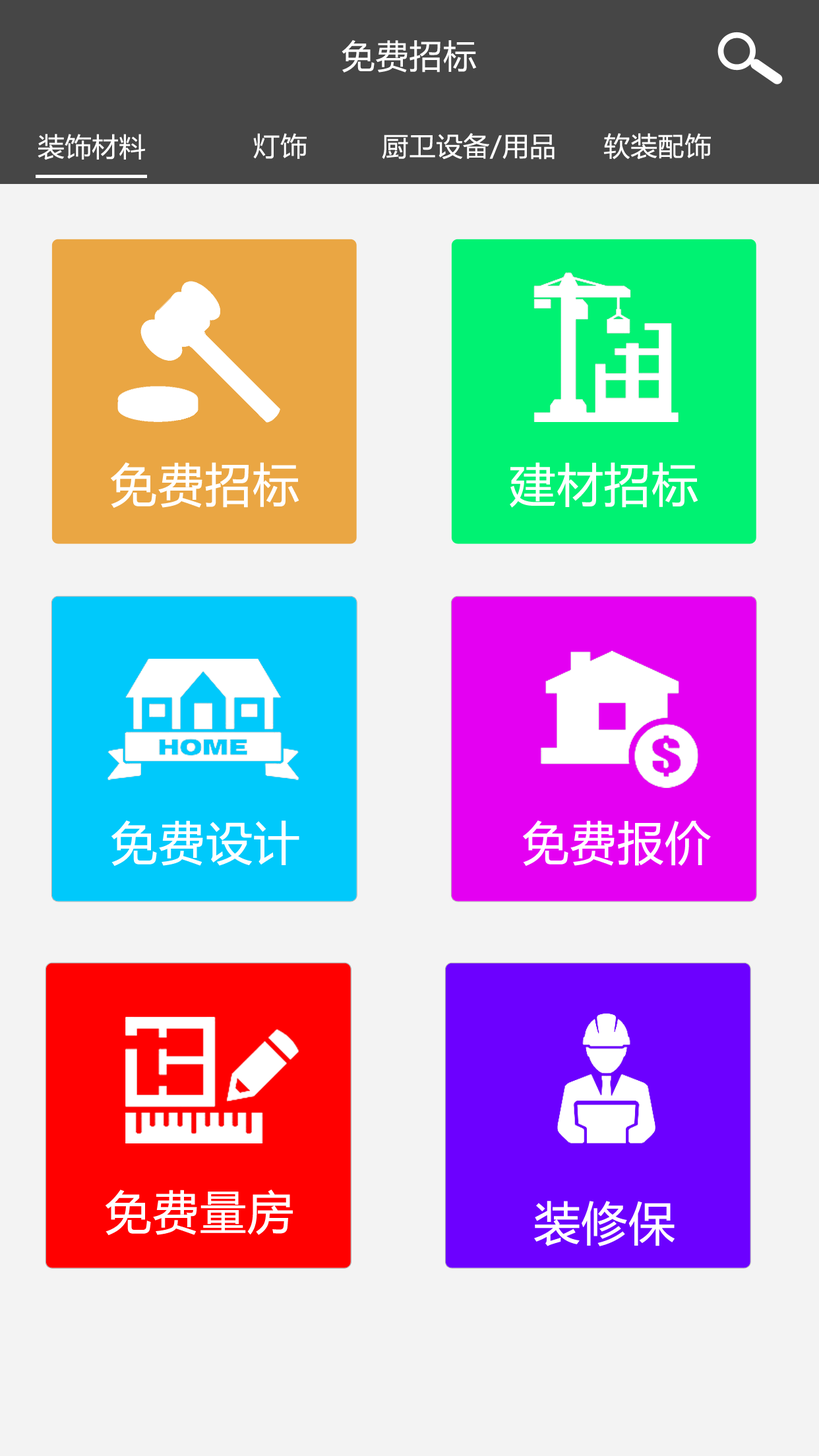
<style>
.page{position:relative;width:819px;height:1456px;background:#f3f3f3}
.page>*{position:absolute;margin:0}
.t1{font:33px "MicrosoftYaHei";color:#ffffff;font-weight:bold}
.t2{font:26.4px "MicrosoftYaHei";color:#ffffff;font-weight:bold}
.t3{font:46.2px "MicrosoftYaHei";color:#ffffff;font-weight:bold}
</style>
<div class="page">
<p class="t1" style="left:342px;top:40px;width:135px;height:33px">免费招标</p>
<p class="t2" style="left:38px;top:134px;width:107px;height:26px">装饰材料</p>
<p class="t2" style="left:253px;top:133px;width:54px;height:26px">灯饰</p>
<p class="t2" style="left:382px;top:133px;width:173px;height:27px">厨卫设备/用品</p>
<p class="t2" style="left:603px;top:133px;width:108px;height:27px">软装配饰</p>
<p class="t3" style="left:111px;top:462px;width:188px;height:46px">免费招标</p>
<p class="t3" style="left:510px;top:462px;width:188px;height:46px">建材招标</p>
<p class="t3" style="left:111px;top:820px;width:188px;height:46px">免费设计</p>
<p class="t3" style="left:523px;top:820px;width:188px;height:46px">免费报价</p>
<p class="t3" style="left:106px;top:1190px;width:187px;height:45px">免费量房</p>
<p class="t3" style="left:534px;top:1201px;width:141px;height:45px">装修保</p>
</div>
